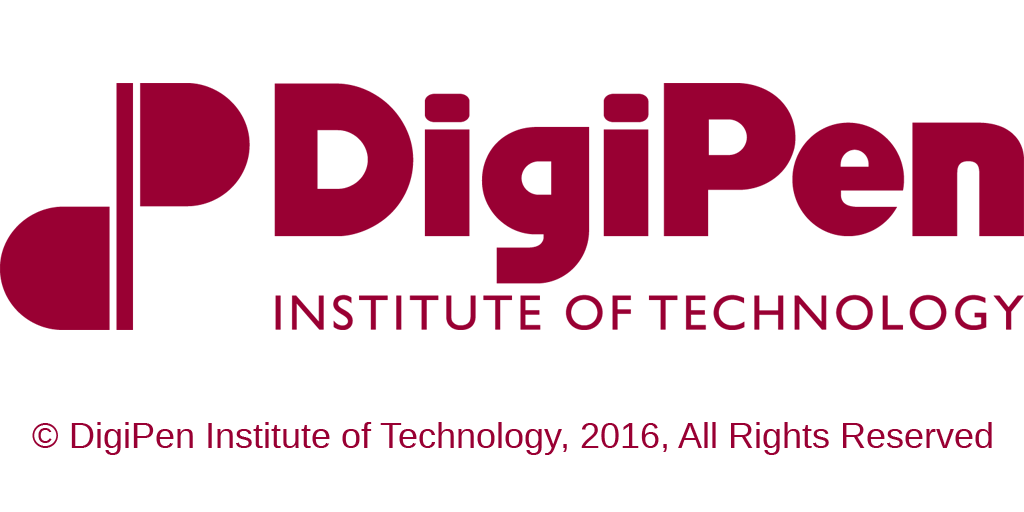
<style>
.page{position:relative;width:1024px;height:512px;background:#ffffff}
.page>*{position:absolute;margin:0}
.t1{font:36px "LiberationSans";color:#990033}
</style>
<div class="page">
<p class="t1" style="left:32px;top:422px;width:960px;height:33px">© DigiPen Institute of Technology, 2016, All Rights Reserved</p>
</div>
